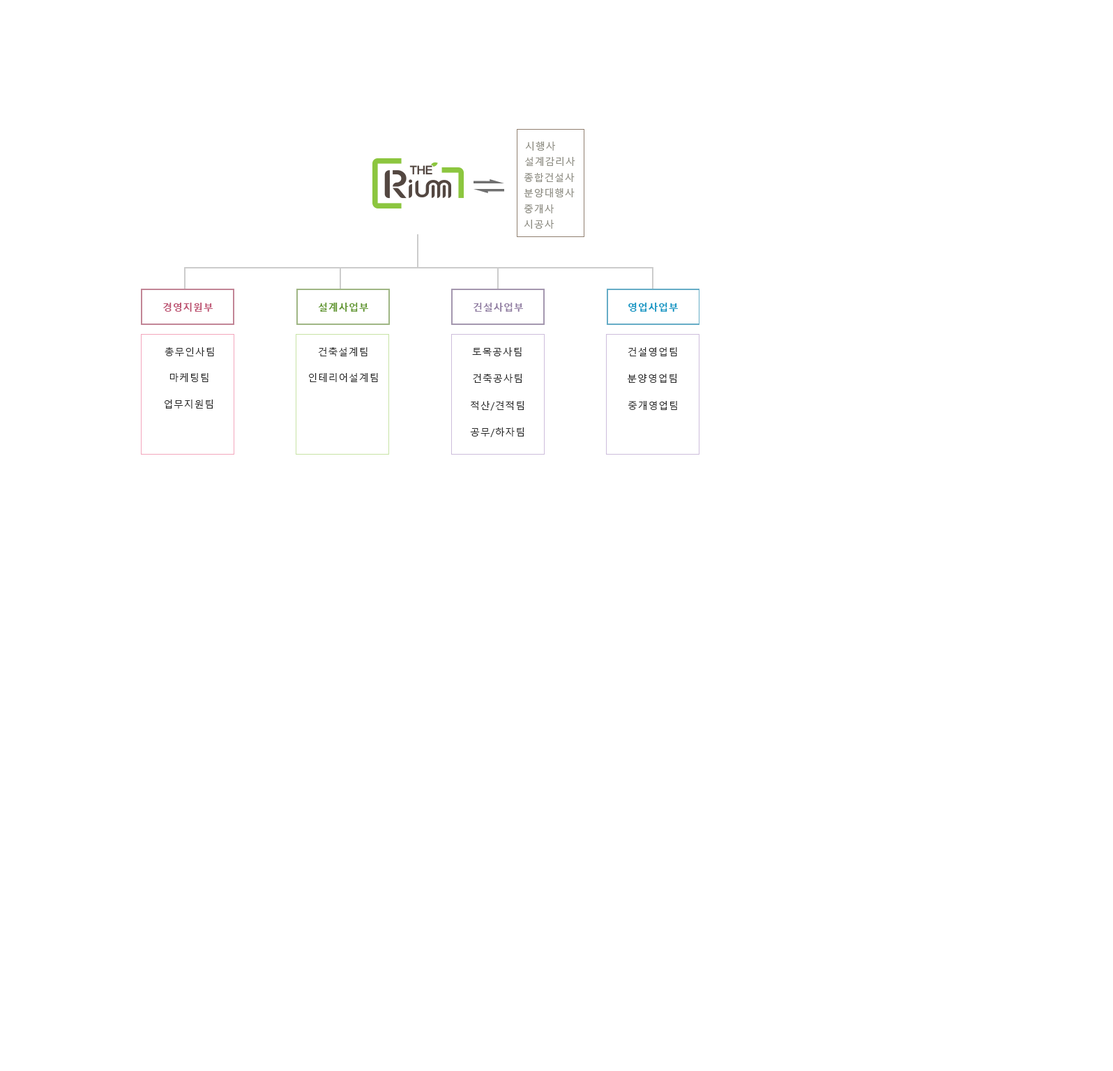
<style>
.page{position:relative;width:1113px;height:1071px;background:#ffffff}
.page>*{position:absolute;margin:0}
.t1{font:9.8px "MalgunGothic";letter-spacing:0.05em;color:#8b8a80}
.t2{font:9.8px "MalgunGothicBold";letter-spacing:0.05em;color:#bc5371}
.t3{font:9.8px "MalgunGothicBold";letter-spacing:0.05em;color:#619532}
.t4{font:9.8px "MalgunGothicBold";letter-spacing:0.05em;color:#907da1}
.t5{font:9.8px "MalgunGothicBold";letter-spacing:0.05em;color:#1392c1}
.t6{font:9.8px "MalgunGothic";letter-spacing:0.05em;color:#262626}
</style>
<div class="page">
<p class="t1" style="left:525px;top:142px;width:30px;height:9px">시행사</p>
<p class="t1" style="left:525px;top:157px;width:50px;height:9px">설계감리사</p>
<p class="t1" style="left:524px;top:173px;width:51px;height:9px">종합건설사</p>
<p class="t1" style="left:524px;top:188px;width:51px;height:9px">분양대행사</p>
<p class="t1" style="left:524px;top:204px;width:30px;height:9px">중개사</p>
<p class="t1" style="left:524px;top:220px;width:30px;height:9px">시공사</p>
<p class="t2" style="left:163px;top:303px;width:50px;height:9px">경영지원부</p>
<p class="t3" style="left:318px;top:303px;width:50px;height:9px">설계사업부</p>
<p class="t4" style="left:474px;top:303px;width:49px;height:9px">건설사업부</p>
<p class="t5" style="left:628px;top:303px;width:50px;height:9px">영업사업부</p>
<p class="t6" style="left:165px;top:347px;width:49px;height:9px">총무인사팀</p>
<p class="t6" style="left:318px;top:347px;width:50px;height:9px">건축설계팀</p>
<p class="t6" style="left:472px;top:347px;width:50px;height:9px">토목공사팀</p>
<p class="t6" style="left:628px;top:347px;width:49px;height:9px">건설영업팀</p>
<p class="t6" style="left:169px;top:373px;width:40px;height:9px">마케팅팀</p>
<p class="t6" style="left:309px;top:373px;width:69px;height:9px">인테리어설계팀</p>
<p class="t6" style="left:473px;top:374px;width:49px;height:9px">건축공사팀</p>
<p class="t6" style="left:628px;top:374px;width:49px;height:9px">분양영업팀</p>
<p class="t6" style="left:165px;top:400px;width:48px;height:9px">업무지원팀</p>
<p class="t6" style="left:471px;top:401px;width:53px;height:10px">적산/견적팀</p>
<p class="t6" style="left:628px;top:401px;width:49px;height:9px">중개영업팀</p>
<p class="t6" style="left:470px;top:428px;width:54px;height:9px">공무/하자팀</p>
</div>
